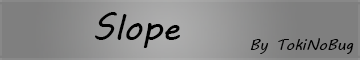
<style>
.page{position:relative;width:360px;height:60px;background:#7f7f7f}
.page>*{position:absolute;margin:0}
.t1{font:36px "MVBoli";color:#000000}
.t2{font:16px "MVBoli";color:#000000}
</style>
<div class="page">
<p class="t1" style="left:95px;top:12px;width:85px;height:36px">Slope</p>
<p class="t2" style="left:250px;top:38px;width:104px;height:16px">By TokiNoBug</p>
</div>
